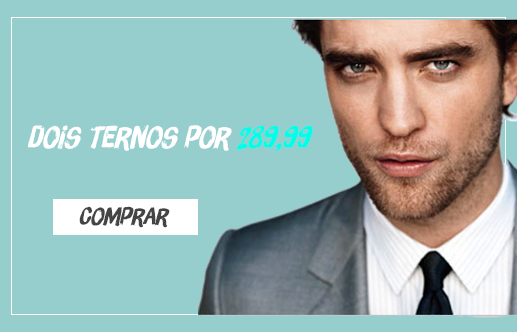
<style>
.page{position:relative;width:517px;height:332px;background:#96cecd}
.page>*{position:absolute;margin:0}
.t1{font:30px "BrushUpTooW01-Regular";letter-spacing:-0.01em;color:#ffffff}
.t2{font:30px "BrushUpTooW01-Regular";letter-spacing:-0.01em;color:#00ffea}
.t3{font:24px "BrushUpTooW01-Regular";letter-spacing:-0.01em;color:#444444}
</style>
<div class="page">
<p class="t1" style="left:28px;top:125px;width:285px;height:27px">dois ternos por <span class="t2">289,99</span></p>
<p class="t3" style="left:79px;top:206px;width:91px;height:22px">Comprar</p>
</div>
